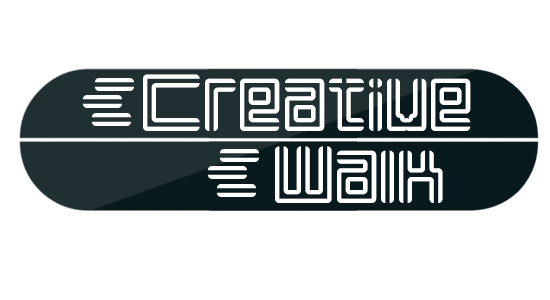
<style>
.page{position:relative;width:550px;height:300px;background:#ffffff}
.page>*{position:absolute;margin:0}
.t1{font:69.6px "Liner";letter-spacing:0.01em;color:#ffffff}
</style>
<div class="page">
<p class="t1" style="left:143px;top:74px;width:328px;height:57px">Creative</p>
<p class="t1" style="left:275px;top:146px;width:168px;height:57px">Walk</p>
</div>
